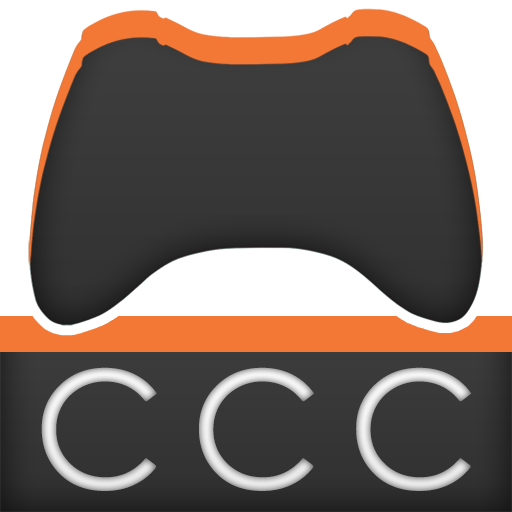
<style>
.page{position:relative;width:512px;height:512px;background:#ffffff}
.page>*{position:absolute;margin:0}
.t1{font:160.4px "CenturyGothic";letter-spacing:0.14em;font-weight:bold}
</style>
<div class="page">
<p class="t1" style="left:41px;top:367px;width:431px;height:124px">CCC</p>
</div>
